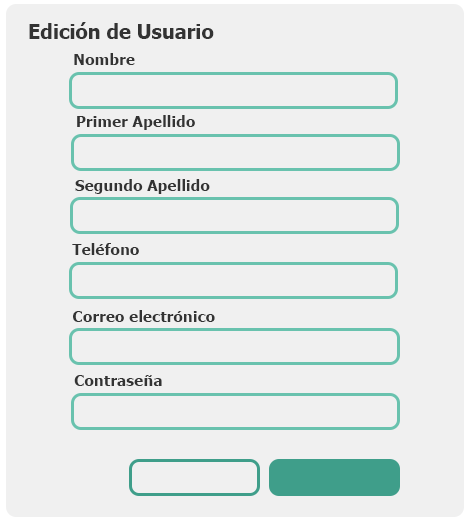
<style>
.page{position:relative;width:470px;height:520px;background:#f0f0f0}
.page>*{position:absolute;margin:0}
.t1{font:20px "Tahoma-Bold";color:#333333}
.t2{font:15.4px "Tahoma-Bold";color:#333333}
</style>
<div class="page">
<p class="t1" style="left:29px;top:22px;width:185px;height:17px">Edición de Usuario</p>
<p class="t2" style="left:74px;top:53px;width:61px;height:12px">Nombre</p>
<p class="t2" style="left:77px;top:115px;width:118px;height:15px">Primer Apellido</p>
<p class="t2" style="left:75px;top:179px;width:135px;height:15px">Segundo Apellido</p>
<p class="t2" style="left:72px;top:243px;width:67px;height:12px">Teléfono</p>
<p class="t2" style="left:73px;top:310px;width:142px;height:12px">Correo electrónico</p>
<p class="t2" style="left:74px;top:375px;width:88px;height:11px">Contraseña</p>
</div>
